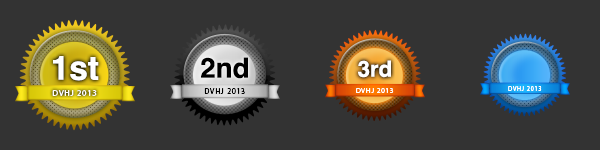
<style>
.page{position:relative;width:600px;height:150px;background:#333333}
.page>*{position:absolute;margin:0}
.t1{font:33.3px "Helvetica-Bold";color:#ffffff}
.t2{font:27.8px "Helvetica-Bold";color:#000000}
.t3{font:22.2px "Helvetica-Bold";color:#ffffff}
.t4{font:8.1px "MyriadPro-Regular";letter-spacing:0.1em;color:#000000;scale:0.95 1}
.t5{font:7.4px "MyriadPro-Regular";letter-spacing:0.1em;color:#ffffff;scale:0.95 1}
.t6{font:6.6px "MyriadPro-Regular";letter-spacing:0.1em;color:#ffffff;scale:0.95 1}
.t7{font:8.8px "MyriadPro-Regular";letter-spacing:0.1em;color:#ffffff;scale:0.95 1}
</style>
<div class="page">
<p class="t1" style="left:53px;top:56px;width:46px;height:25px">1st</p>
<p class="t2" style="left:201px;top:57px;width:47px;height:22px">2nd</p>
<p class="t3" style="left:358px;top:60px;width:33px;height:18px">3rd</p>
<p class="t4" style="left:204px;top:88px;width:41px;height:6px">DVHJ 2013</p>
<p class="t5" style="left:356px;top:88px;width:38px;height:5px">DVHJ 2013</p>
<p class="t6" style="left:508px;top:86px;width:34px;height:5px">DVHJ 2013</p>
<p class="t7" style="left:52px;top:90px;width:45px;height:6px">DVHJ 2013</p>
</div>
